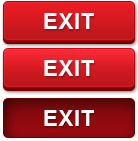
<style>
.page{position:relative;width:138px;height:141px}
.page>*{position:absolute;margin:0}
.t1{font:21.7px "Arial-BoldMT";letter-spacing:0.05em;color:#ffffff;text-transform:uppercase}
</style>
<div class="page">
<p class="t1" style="left:44px;top:13px;width:50px;height:16px">exit</p>
<p class="t1" style="left:44px;top:60px;width:50px;height:16px">exit</p>
<p class="t1" style="left:44px;top:110px;width:50px;height:16px">exit</p>
</div>
